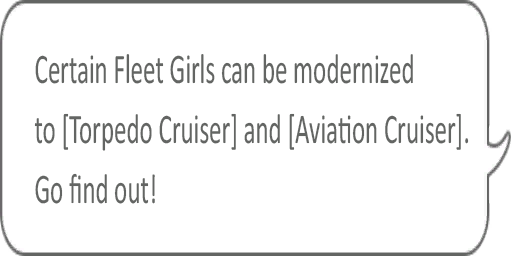
<style>
.page{position:relative;width:512px;height:256px;background:#ffffff}
.page>*{position:absolute;margin:0}
.t1{font:42.5px/60px "Calibri";color:#636563;scale:0.59 1}
</style>
<div class="page">
<p class="t1" style="left:34px;top:54px;width:435px;height:150px">Certain Fleet Girls can be modernized <br>to [Torpedo Cruiser] and [Aviation Cruiser]. <br>Go find out!</p>
</div>
